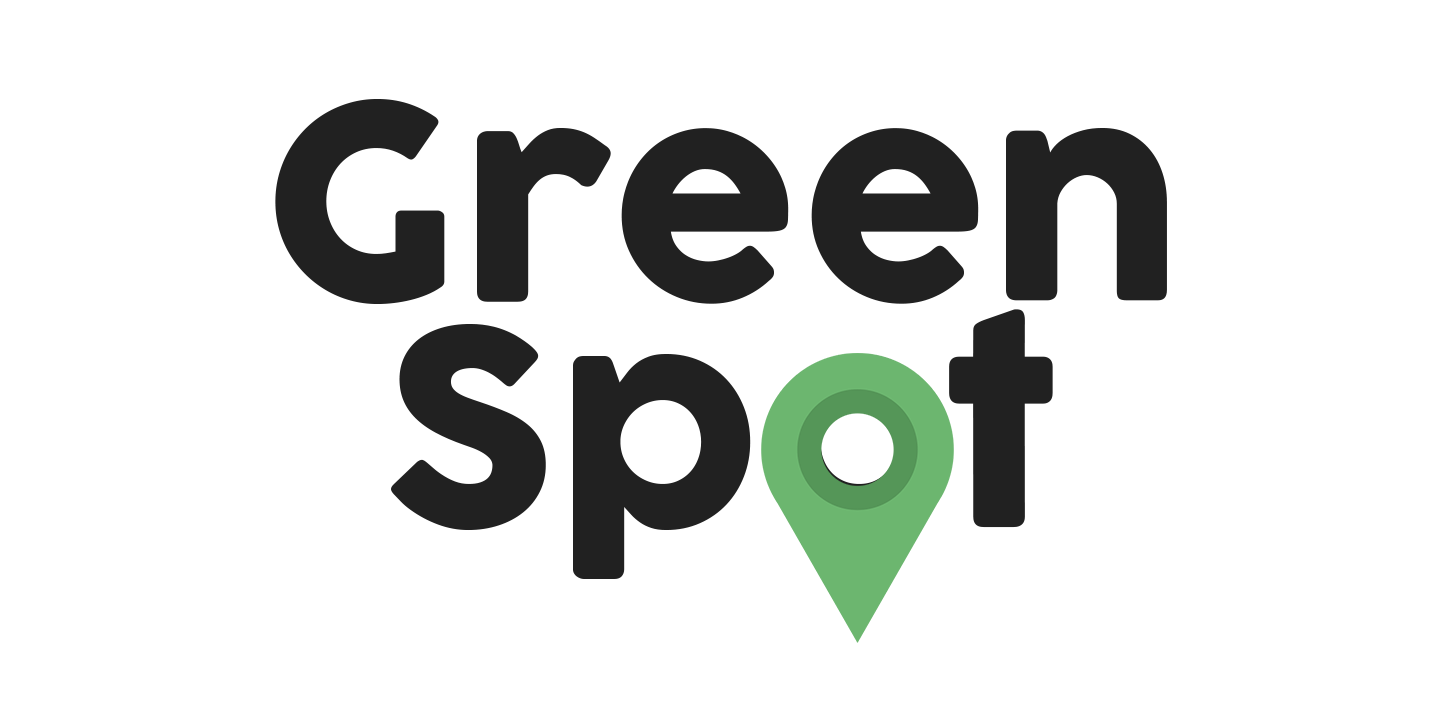
<style>
.page{position:relative;width:1440px;height:711px;background:#ffffff}
.page>*{position:absolute;margin:0}
.t1{font:267.7px/226.5px "Cocogoose";color:#212121}
</style>
<div class="page">
<p class="t1" style="left:275px;top:99px;width:892px;height:480px;text-align:center">Green<br>Spot</p>
</div>
